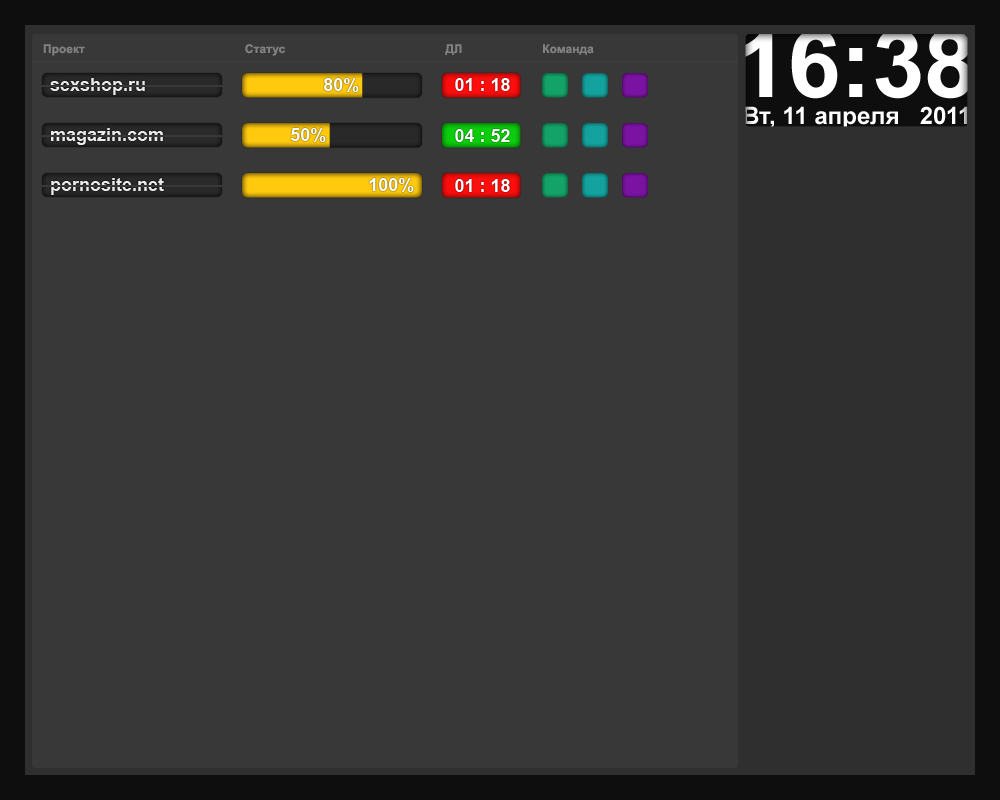
<style>
.page{position:relative;width:1000px;height:800px;background:#383838}
.page>*{position:absolute;margin:0}
.t1{font:94.2px "Arial-BoldMT";color:#ffffff}
.t2{font:12px "Arial-BoldMT";color:#818181}
.t3{font:18px "Arial-BoldMT";color:#ebebeb}
.t4{font:18px "Arial-BoldMT";color:#ffffff}
.t5{font:24px "Arial-BoldMT";color:#ffffff}
</style>
<div class="page">
<p class="t1" style="left:742px;top:29px;width:231px;height:70px">16:38</p>
<p class="t2" style="left:43px;top:44px;width:551px;height:12px">Проект                                                Статус                                                ДЛ                        Команда</p>
<p class="t3" style="left:50px;top:78px;width:95px;height:17px">sexshop.ru</p>
<p class="t4" style="left:324px;top:78px;width:35px;height:14px">80%</p>
<p class="t4" style="left:455px;top:78px;width:55px;height:13px">01 : 18</p>
<p class="t5" style="left:743px;top:106px;width:225px;height:23px">Вт, 11 апреля   2011</p>
<p class="t3" style="left:51px;top:128px;width:112px;height:17px">magazin.com</p>
<p class="t4" style="left:291px;top:128px;width:35px;height:14px">50%</p>
<p class="t4" style="left:455px;top:129px;width:55px;height:13px">04 : 52</p>
<p class="t3" style="left:51px;top:178px;width:113px;height:17px">pornosite.net</p>
<p class="t4" style="left:369px;top:178px;width:45px;height:14px">100%</p>
<p class="t4" style="left:455px;top:179px;width:55px;height:13px">01 : 18</p>
</div>
